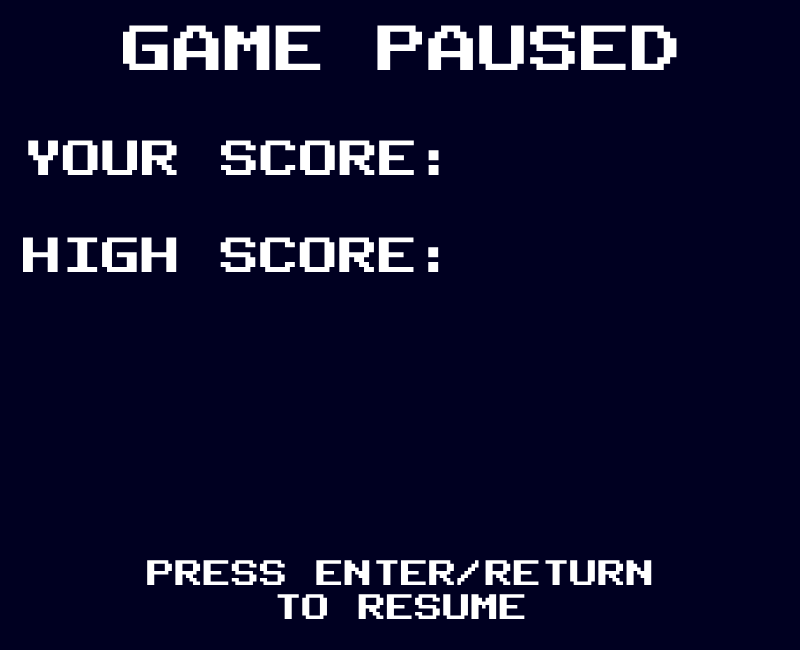
<style>
.page{position:relative;width:800px;height:650px;background:#000021}
.page>*{position:absolute;margin:0}
.t1{font:50.9px "PublicPixel";color:#ffffff}
.t2{font:39.5px "PublicPixel";color:#ffffff}
.t3{font:28.2px "PublicPixel";color:#ffffff}
</style>
<div class="page">
<p class="t1" style="left:123px;top:25px;width:554px;height:45px">GAME PAUSED</p>
<p class="t2" style="left:28px;top:140px;width:411px;height:35px">YOUR SCORE:</p>
<p class="t2" style="left:23px;top:237px;width:416px;height:35px">HIGH SCORE:</p>
<p class="t3" style="left:147px;top:560px;width:505px;height:60px;text-align:center">PRESS ENTER/RETURN<br>TO RESUME</p>
</div>
